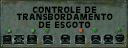
<style>
.page{position:relative;width:128px;height:48px}
.page>*{position:absolute;margin:0}
.t1{font:9px/7.4px "CartesDisplaySSK";letter-spacing:0.06em;color:#000000;text-transform:uppercase}
.t2{font:9px/7.5px "CartesDisplaySSK";letter-spacing:0.06em;color:#000000;text-transform:uppercase}
.t3{font:9px/7.8px "CartesDisplaySSK";letter-spacing:0.06em;color:#000000;text-transform:uppercase}
</style>
<div class="page">
<p class="t1" style="left:16px;top:6px;width:97px;height:22px;text-align:center"><span class="t2">Controle de<br></span>transbordamento<br><span class="t3">de esgoto</span></p>
</div>
